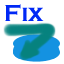
<style>
.page{position:relative;width:64px;height:64px;background:#ffffff}
.page>*{position:absolute;margin:0}
.t1{font:24px "CopperplateGothic-Bold";color:#0028f5}
</style>
<div class="page">
<p class="t1" style="left:5px;top:4px;width:39px;height:17px">Fix</p>
</div>
